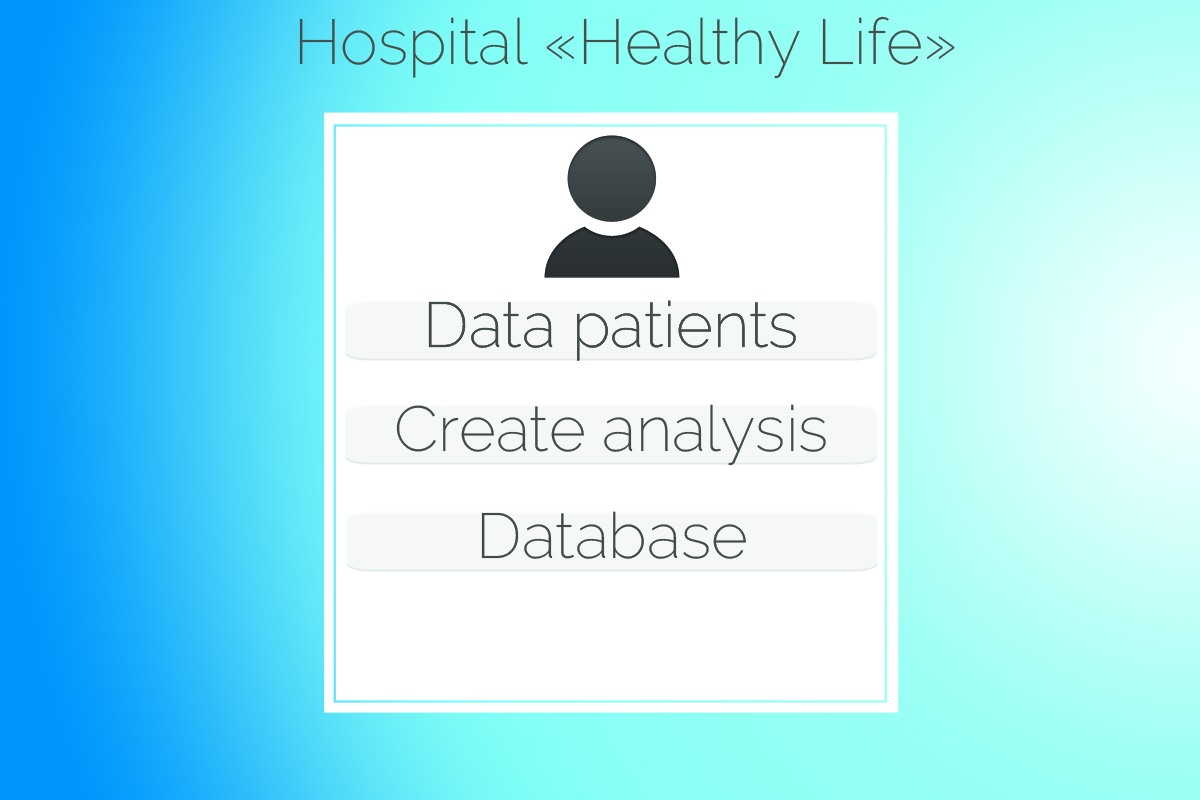
<style>
.page{position:relative;width:1200px;height:800px;background:#ffffff}
.page>*{position:absolute;margin:0}
.t1{font:63.5px "Raleway-ExtraLight";color:#44504c}
.t2{font:63.5px "Raleway-ExtraLight";color:#414c49}
</style>
<div class="page">
<p class="t1" style="left:299px;top:16px;width:656px;height:63px">Hospital «Healthy Life»</p>
<p class="t2" style="left:428px;top:300px;width:368px;height:61px">Data patients</p>
<p class="t2" style="left:428px;top:300px;width:368px;height:61px">Data patients</p>
<p class="t2" style="left:396px;top:404px;width:430px;height:62px">Create analysis</p>
<p class="t2" style="left:481px;top:511px;width:265px;height:48px">Database</p>
</div>
